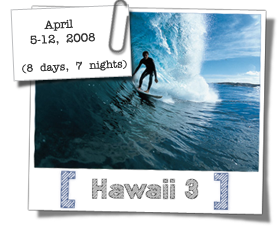
<style>
.page{position:relative;width:279px;height:228px;background:#ffffff}
.page>*{position:absolute;margin:0}
.t1{font:12px "Typist";letter-spacing:-0.025em;color:#333333}
.t2{font:11px/9px "Typist";color:#333333}
.t3{font:11px "Typist";color:#333333}
</style>
<div class="page">
<p class="t1" style="left:22px;top:19px;width:105px;height:55px;text-align:center;rotate:-3deg">April    <br>5-12, 2008   <br><br><span class="t2">(8 days, 7 nights</span><span class="t3">)</span></p>
</div>
